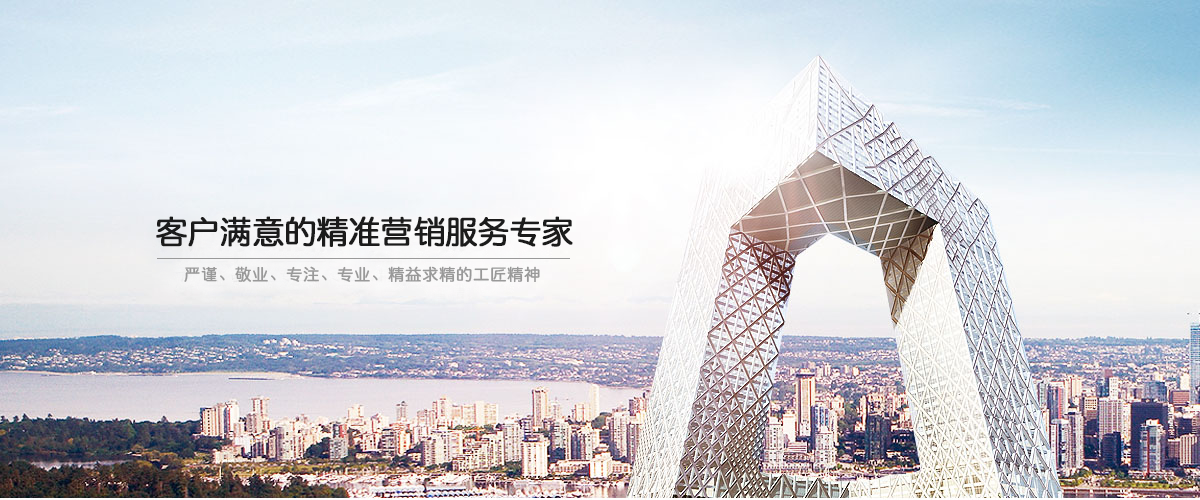
<style>
.page{position:relative;width:1200px;height:500px}
.page>*{position:absolute;margin:0}
.t1{font:32px "QingYuan";letter-spacing:-0.025em;color:#1b1b1b;font-weight:bold}
.t2{font:16px "QingYuan";color:#999999;font-weight:bold}
</style>
<div class="page">
<p class="t1" style="left:156px;top:216px;width:417px;height:31px">客户满意的精准营销服务专家</p>
<p class="t2" style="left:184px;top:266px;width:356px;height:17px">严谨、敬业、专注、专业、精益求精的工匠精神</p>
</div>
